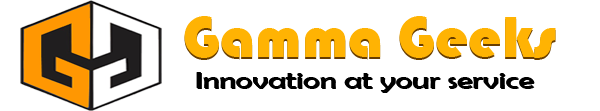
<style>
.page{position:relative;width:600px;height:111px;background:#ffffff}
.page>*{position:absolute;margin:0}
.t1{font:60px "Bauhaus93";color:#ffb303}
.t2{font:24px "BerlinSansFB-Reg";color:#000000;scale:1.32 1}
</style>
<div class="page">
<p class="t1" style="left:184px;top:16px;width:372px;height:42px">Gamma Geeks</p>
<p class="t1" style="left:184px;top:18px;width:372px;height:42px">Gamma Geeks</p>
<p class="t2" style="left:196px;top:72px;width:338px;height:20px">Innovation at your service</p>
<p class="t2" style="left:197px;top:73px;width:338px;height:20px">Innovation at your service</p>
</div>
